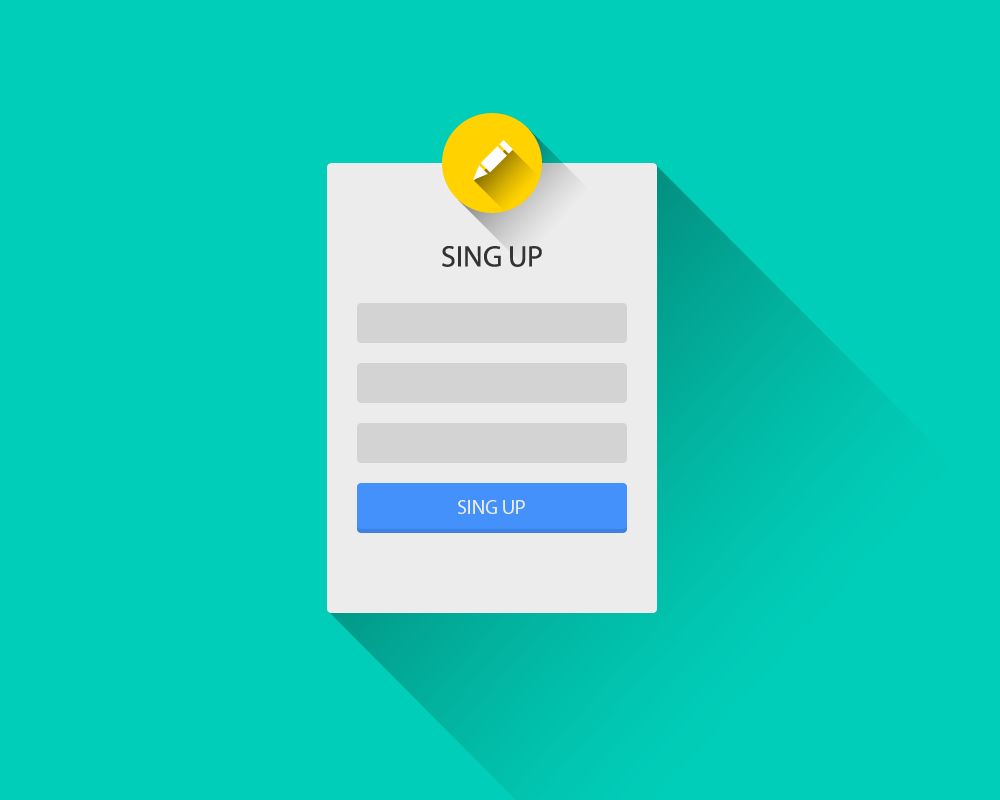
<style>
.page{position:relative;width:1000px;height:800px;background:#01ceb8}
.page>*{position:absolute;margin:0}
.t1{font:29.8px "MyriadPro-Regular";color:#333333}
.t2{font:20px "MyriadPro-Regular";color:#ececec;text-transform:uppercase}
</style>
<div class="page">
<p class="t1" style="left:442px;top:246px;width:100px;height:21px">SING UP</p>
<p class="t2" style="left:458px;top:500px;width:67px;height:14px">SING UP</p>
</div>
